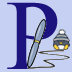
<style>
.page{position:relative;width:72px;height:72px;background:#c5d0f3}
.page>*{position:absolute;margin:0}
.t1{font:100px "TimesNewRomanPSMT";color:#1e137f}
</style>
<div class="page">
<p class="t1" style="left:7px;top:2px;width:51px;height:67px">P</p>
</div>
